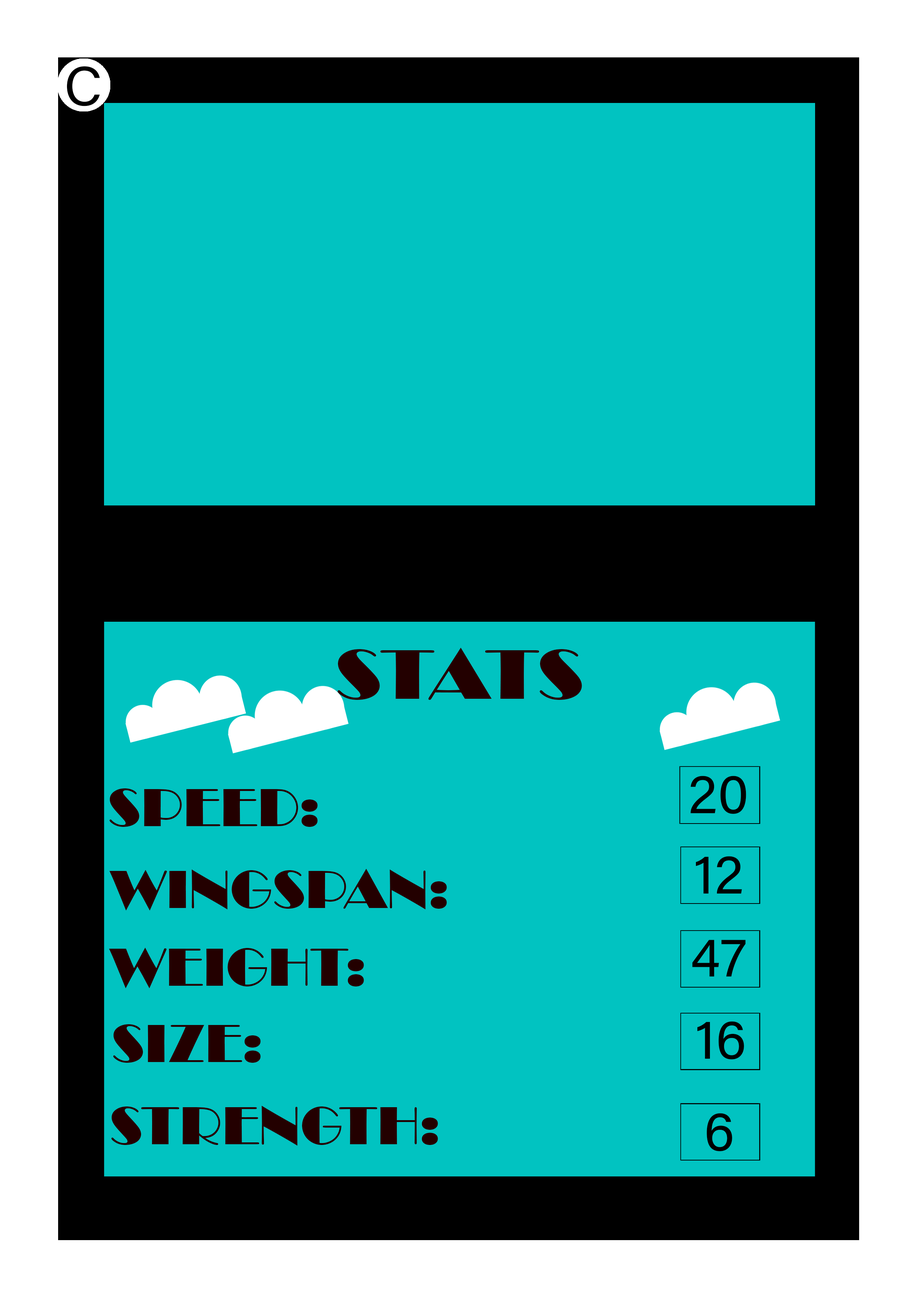
<style>
.page{position:relative;width:918px;height:1299px;background:#01c3c1}
.page>*{position:absolute;margin:0}
.t1{font:55.5px "AcuminConcept-Regular";color:#000000}
.t2{font:72.4px "Broadway";color:#230000;scale:1.09 1}
.t3{font:55.5px "Broadway";color:#230000}
</style>
<div class="page">
<p class="t1" style="left:67px;top:66px;width:33px;height:40px">C</p>
<p class="t2" style="left:338px;top:648px;width:244px;height:52px">STATS</p>
<p class="t1" style="left:690px;top:776px;width:56px;height:38px">20</p>
<p class="t3" style="left:110px;top:788px;width:208px;height:39px">SPEED:</p>
<p class="t1" style="left:696px;top:856px;width:46px;height:37px">12</p>
<p class="t3" style="left:109px;top:869px;width:338px;height:41px">WINGSPAN:</p>
<p class="t1" style="left:692px;top:940px;width:54px;height:36px">47</p>
<p class="t3" style="left:109px;top:947px;width:255px;height:41px">WEIGHT:</p>
<p class="t3" style="left:113px;top:1024px;width:148px;height:39px">SIZE:</p>
<p class="t1" style="left:697px;top:1021px;width:47px;height:38px">16</p>
<p class="t3" style="left:111px;top:1105px;width:327px;height:40px">STRENGTH:</p>
<p class="t1" style="left:707px;top:1113px;width:25px;height:38px">6</p>
</div>
